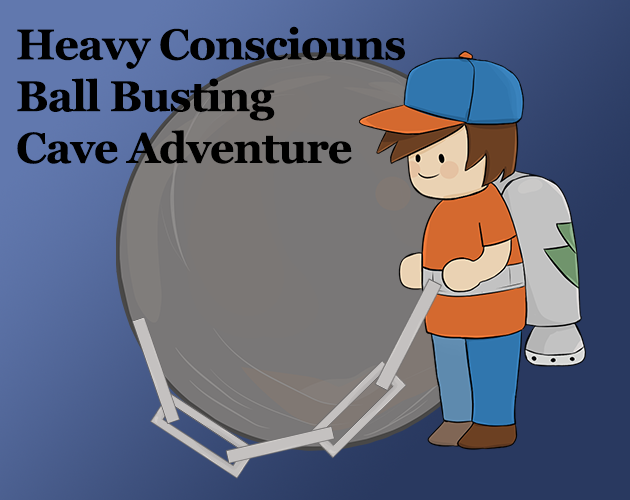
<style>
.page{position:relative;width:630px;height:500px}
.page>*{position:absolute;margin:0}
.t1{font:43.1px "Georgia-Bold";letter-spacing:-0.025em;color:#000000}
</style>
<div class="page">
<p class="t1" style="left:17px;top:26px;width:388px;height:138px">Heavy Consciouns <br>Ball Busting <br>Cave Adventure</p>
</div>
